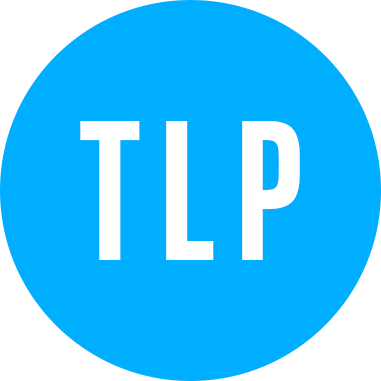
<style>
.page{position:relative;width:381px;height:381px;background:#00aeff}
.page>*{position:absolute;margin:0}
.t1{font:202px "IntelClearPro-Bold";letter-spacing:0.1em;color:#ffffff}
</style>
<div class="page">
<p class="t1" style="left:80px;top:121px;width:220px;height:139px">TLP</p>
</div>
